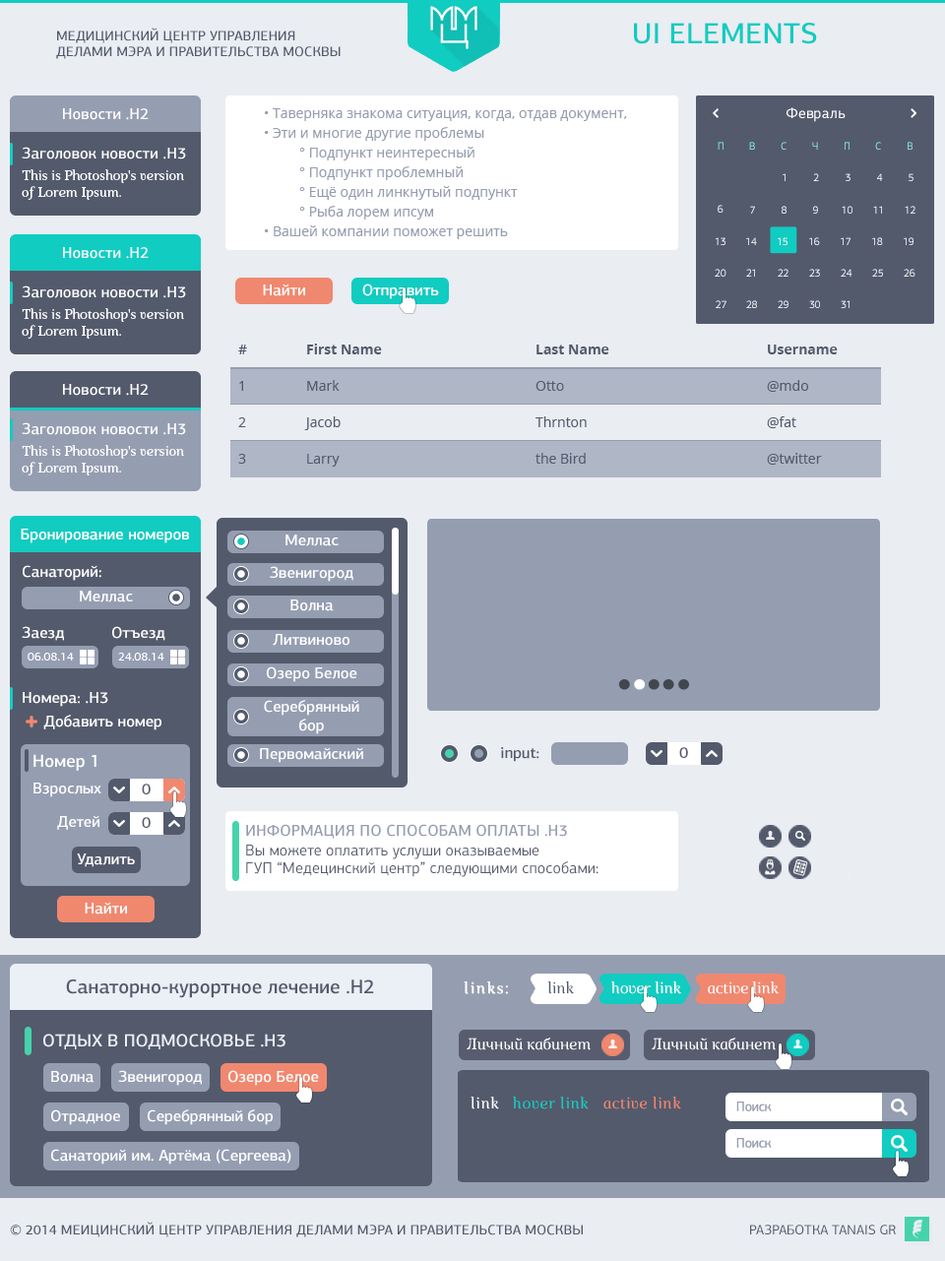
<style>
.page{position:relative;width:945px;height:1261px;background:#eaedf2}
.page>*{position:absolute;margin:0}
.t1{font:13.8px "PFAgoraSansPro-Medium";color:#535a6c;text-transform:uppercase}
.t2{font:29.5px "PFAgoraSansPro-Medium";color:#11ccc1;text-transform:uppercase}
.t3{font:13.8px/19.7px "OpenSans";color:#959db1}
.t4{font:13.8px "OpenSans";color:#959db1}
.t5{font:15.1px "PFAgoraSansPro-Regular";color:#ffffff}
.t6{font:10.8px "PFAgoraSansPro-Regular"}
.t7{font:10.8px "PFAgoraSansPro-Regular";color:#8ef1eb}
.t8{font:10.8px "PFAgoraSansPro-Regular";text-transform:uppercase}
.t9{font:10.8px "PFAgoraSansPro-Regular";color:#ffffff;text-transform:uppercase}
.t10{font:15.8px "PFAgoraSansPro-Medium";color:#ffffff}
.t11{font:13.8px/36.4px "OpenSans";color:#535a6c}
.t12{font:13.8px/36.4px "OpenSans-Semibold";color:#535a6c}
.t13{font:13.8px/36.4px "OpenSans-Bold";color:#535a6c}
.t14{font:11.7px "PFAgoraSansPro-Medium";color:#ffffff}
.t15{font:15.8px "PFAgoraSansPro-Medium";color:#535a6c}
.t16{font:17.7px "PFAgoraSansPro-Medium";color:#ffffff}
.t17{font:15.8px "PFAgoraSansPro-Medium";color:#959db1;text-transform:uppercase}
.t18{font:15.8px/17.7px "PFAgoraSansPro-Regular";color:#575c6f}
.t19{font:19.7px "PFAgoraSansPro-Medium";color:#535a6c}
.t20{font:15.9px "Marta-Italic";letter-spacing:0.08em;color:#ffffff;font-weight:bold}
.t21{font:15.9px "Marta-Italic";color:#535a6c}
.t22{font:15.9px "Marta-Italic";color:#ffffff}
.t23{font:17.7px "PFAgoraSansPro-Medium";color:#ebf0f6;text-transform:uppercase}
.t24{font:15.9px "Marta-Italic";letter-spacing:0.04em;color:#ffffff}
.t25{font:15.9px "Marta-Italic";letter-spacing:0.04em;color:#11ccc1}
.t26{font:15.9px "Marta-Italic";letter-spacing:0.04em;color:#f0886f}
.t27{font:13.8px "PFAgoraSansPro-Regular";color:#535a6c;text-transform:uppercase}
</style>
<div class="page">
<p class="t1" style="left:56px;top:28px;width:285px;height:31px">Медицинский центр Управления делами Мэра и Правительства Москвы</p>
<p class="t2" style="left:634px;top:23px;width:183px;height:21px">UI ELEMENTS</p>
<p class="t3" style="left:265px;top:108px;width:362px;height:131px">• <span class="t4">Tаверняка знакома ситуация, когда, отдав документ, <br></span>• <span class="t4">Эти и многие другие проблемы<br></span> ° Подпункт неинтересный<br> ° Подпункт проблемный<br> ° Ещё один линкнутый подпункт<br> ° Рыба лорем ипсум<br>• <span class="t4">Вашей компании поможет решить</span></p>
<p class="t5" style="left:787px;top:107px;width:59px;height:15px">Февраль</p>
<p class="t6" style="left:718px;top:142px;width:6px;height:8px">П</p>
<p class="t6" style="left:749px;top:142px;width:6px;height:8px">В</p>
<p class="t6" style="left:781px;top:142px;width:6px;height:8px">С</p>
<p class="t6" style="left:812px;top:142px;width:6px;height:8px">Ч</p>
<p class="t6" style="left:845px;top:142px;width:5px;height:8px">П</p>
<p class="t6" style="left:875px;top:142px;width:6px;height:8px">С</p>
<p class="t7" style="left:908px;top:142px;width:5px;height:8px">В</p>
<p class="t8" style="left:783px;top:173px;width:3px;height:8px">1</p>
<p class="t9" style="left:813px;top:173px;width:6px;height:8px">2</p>
<p class="t8" style="left:846px;top:173px;width:5px;height:8px">3</p>
<p class="t9" style="left:877px;top:173px;width:6px;height:8px">4</p>
<p class="t8" style="left:909px;top:173px;width:5px;height:8px">5</p>
<p class="t9" style="left:718px;top:205px;width:6px;height:8px">6</p>
<p class="t8" style="left:750px;top:206px;width:5px;height:8px">7</p>
<p class="t8" style="left:782px;top:206px;width:5px;height:8px">8</p>
<p class="t8" style="left:813px;top:206px;width:5px;height:8px">9</p>
<p class="t8" style="left:842px;top:206px;width:11px;height:8px">10</p>
<p class="t8" style="left:873px;top:206px;width:9px;height:8px">11</p>
<p class="t9" style="left:905px;top:206px;width:11px;height:8px">12</p>
<p class="t9" style="left:716px;top:237px;width:10px;height:8px">13</p>
<p class="t8" style="left:746px;top:237px;width:11px;height:8px">14</p>
<p class="t8" style="left:778px;top:237px;width:10px;height:8px">15</p>
<p class="t9" style="left:809px;top:237px;width:11px;height:8px">16</p>
<p class="t9" style="left:841px;top:237px;width:10px;height:8px">17</p>
<p class="t8" style="left:872px;top:237px;width:11px;height:8px">18</p>
<p class="t9" style="left:904px;top:237px;width:10px;height:8px">19</p>
<p class="t9" style="left:715px;top:269px;width:12px;height:8px">20</p>
<p class="t9" style="left:746px;top:269px;width:9px;height:8px">21</p>
<p class="t9" style="left:778px;top:269px;width:11px;height:8px">22</p>
<p class="t9" style="left:809px;top:269px;width:11px;height:8px">23</p>
<p class="t9" style="left:841px;top:269px;width:12px;height:8px">24</p>
<p class="t9" style="left:872px;top:269px;width:11px;height:8px">25</p>
<p class="t9" style="left:904px;top:269px;width:12px;height:8px">26</p>
<p class="t10" style="left:263px;top:284px;width:42px;height:12px">Найти</p>
<p class="t10" style="left:362px;top:284px;width:77px;height:15px">Отправить</p>
<p class="t9" style="left:716px;top:300px;width:11px;height:8px">27</p>
<p class="t9" style="left:746px;top:300px;width:11px;height:8px">28</p>
<p class="t9" style="left:778px;top:300px;width:11px;height:8px">29</p>
<p class="t9" style="left:809px;top:300px;width:11px;height:8px">30</p>
<p class="t9" style="left:841px;top:300px;width:9px;height:8px">31</p>
<p class="t11" style="left:238px;top:345px;width:9px;height:119px"><span class="t12">#<br></span>1<br>2<br>3</p>
<p class="t11" style="left:304px;top:344px;width:78px;height:123px"><span class="t13">First Name<br></span>Mark<br>Jacob<br>Larry</p>
<p class="t11" style="left:536px;top:345px;width:74px;height:119px"><span class="t13">Last Name<br></span>Otto<br>Thrnton<br>the Bird</p>
<p class="t11" style="left:767px;top:345px;width:71px;height:120px"><span class="t13">Username<br></span>@mdo<br>@fat<br>@twitter</p>
<p class="t10" style="left:21px;top:529px;width:168px;height:15px">Бронирование номеров</p>
<p class="t10" style="left:286px;top:535px;width:53px;height:12px">Меллас</p>
<p class="t10" style="left:23px;top:565px;width:78px;height:16px">Санаторий:</p>
<p class="t10" style="left:270px;top:566px;width:84px;height:16px">Звенигород</p>
<p class="t10" style="left:80px;top:591px;width:53px;height:12px">Меллас</p>
<p class="t10" style="left:290px;top:600px;width:44px;height:12px">Волна</p>
<p class="t10" style="left:22px;top:626px;width:42px;height:15px">Заезд</p>
<p class="t10" style="left:112px;top:626px;width:53px;height:15px">Отъезд</p>
<p class="t10" style="left:273px;top:634px;width:77px;height:12px">Литвиново</p>
<p class="t14" style="left:28px;top:653px;width:46px;height:8px">06.08.14</p>
<p class="t14" style="left:118px;top:653px;width:46px;height:8px">24.08.14</p>
<p class="t10" style="left:267px;top:667px;width:90px;height:15px">Озеро Белое</p>
<p class="t10" style="left:23px;top:692px;width:85px;height:15px">Номера: .H3</p>
<p class="t10" style="left:264px;top:700px;width:95px;height:35px;text-align:center">Серебрянный <br>бор</p>
<p class="t10" style="left:43px;top:715px;width:118px;height:16px">Добавить номер</p>
<p class="t10" style="left:260px;top:747px;width:103px;height:16px">Первомайский</p>
<p class="t15" style="left:501px;top:747px;width:39px;height:15px">input:</p>
<p class="t15" style="left:679px;top:747px;width:9px;height:11px">0</p>
<p class="t16" style="left:33px;top:754px;width:64px;height:17px">Номер 1</p>
<p class="t10" style="left:33px;top:783px;width:68px;height:15px">Взрослых</p>
<p class="t15" style="left:142px;top:784px;width:9px;height:11px">0</p>
<p class="t10" style="left:57px;top:815px;width:42px;height:15px">Детей</p>
<p class="t15" style="left:142px;top:817px;width:9px;height:11px">0</p>
<p class="t17" style="left:246px;top:824px;width:321px;height:15px">Информация по способам оплаты .H3</p>
<p class="t18" style="left:246px;top:845px;width:353px;height:32px">Вы можете оплатить услуши оказываемые <br>ГУП “Медецинский центр” следующими способами:</p>
<p class="t10" style="left:77px;top:854px;width:58px;height:14px">Удалить</p>
<p class="t10" style="left:85px;top:902px;width:42px;height:13px">Найти</p>
<p class="t19" style="left:66px;top:980px;width:308px;height:18px">Санаторно-курортное лечение .H2</p>
<p class="t20" style="left:464px;top:982px;width:44px;height:13px">links:</p>
<p class="t21" style="left:547px;top:982px;width:27px;height:13px">link</p>
<p class="t22" style="left:612px;top:982px;width:69px;height:13px">hover link</p>
<p class="t22" style="left:708px;top:982px;width:71px;height:13px">active link</p>
<p class="t23" style="left:43px;top:1034px;width:243px;height:16px">Отдых в Подмосковье .H3</p>
<p class="t22" style="left:467px;top:1038px;width:124px;height:13px">Личный кабинет</p>
<p class="t10" style="left:228px;top:1070px;width:91px;height:16px">Озеро Белое</p>
<p class="t24" style="left:471px;top:1097px;width:28px;height:13px">link</p>
<p class="t25" style="left:513px;top:1097px;width:76px;height:13px">hover link</p>
<p class="t26" style="left:604px;top:1097px;width:77px;height:13px">active link</p>
<p class="t1" style="left:10px;top:1222px;width:573px;height:16px">© 2014 Меицинский центр Управления делами Мэра и Правительства Москвы</p>
<p class="t27" style="left:750px;top:1225px;width:146px;height:10px">Разработка Tanais Gr</p>
</div>
